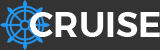
<style>
.page{position:relative;width:160px;height:50px;background:#333333}
.page>*{position:absolute;margin:0}
.t1{font:35px "Montserrat-SemiBold";color:#fefefe}
</style>
<div class="page">
<p class="t1" style="left:29px;top:12px;width:131px;height:25px">CRUISE</p>
</div>
